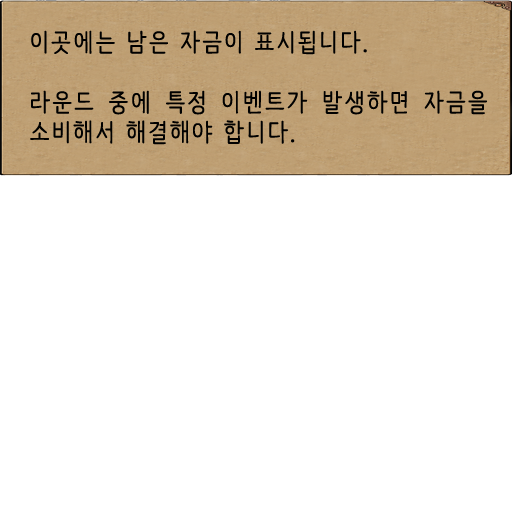
<style>
.page{position:relative;width:512px;height:512px;background:#ffffff}
.page>*{position:absolute;margin:0}
.t1{font:25px "NanumBarunpen";letter-spacing:0.075em;color:#000000;font-weight:bold}
</style>
<div class="page">
<p class="t1" style="left:30px;top:30px;width:457px;height:115px;text-align:justify">이곳에는 남은 자금이 표시됩니다.<br><br>라운드 중에 특정 이벤트가 발생하면 자금을 소비해서 해결해야 합니다.</p>
</div>
